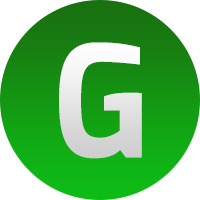
<style>
.page{position:relative;width:200px;height:200px;background:#ffffff}
.page>*{position:absolute;margin:0}
.t1{font:155.5px "Exo-Bold";color:#e3e3e3}
</style>
<div class="page">
<p class="t1" style="left:59px;top:42px;width:83px;height:117px">G</p>
</div>
